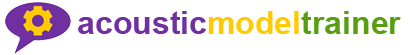
<style>
.page{position:relative;width:410px;height:55px;background:#ffffff}
.page>*{position:absolute;margin:0}
.t1{font:32px "Arial-BoldMT";color:#7030a0}
.t2{font:32px "Arial-BoldMT";color:#ffca00}
.t3{font:32px "Arial-BoldMT";color:#579e11}
</style>
<div class="page">
<p class="t1" style="left:78px;top:11px;width:323px;height:23px">acoustic<span class="t2">model</span><span class="t3">trainer</span></p>
</div>
